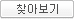
<style>
.page{position:relative;width:74px;height:19px}
.page>*{position:absolute;margin:0}
.t1{font:12px "morris9";color:#4f4f4f}
</style>
<div class="page">
<p class="t1" style="left:17px;top:4px;width:41px;height:10px">찾아보기</p>
</div>
